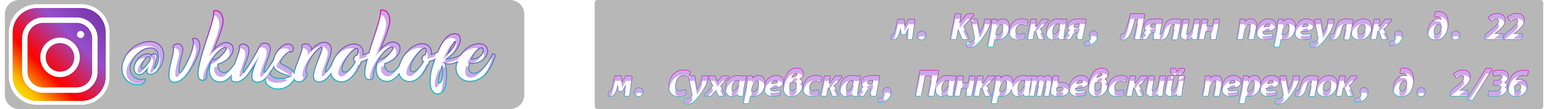
<style>
.page{position:relative;width:1568px;height:109px;background:#b7b7b7}
.page>*{position:absolute;margin:0}
.t1{font:38px "Consolas-BoldItalic";letter-spacing:-0.075em;font-weight:bold}
</style>
<div class="page">
<p class="t1" style="left:891px;top:12px;width:633px;height:35px">м. Курская, Лялин переулок, д. 22</p>
<p class="t1" style="left:608px;top:68px;width:920px;height:36px">м. Сухаревская, Панкратьевский переулок, д. 2/36</p>
</div>
